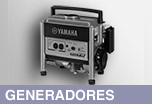
<style>
.page{position:relative;width:152px;height:104px}
.page>*{position:absolute;margin:0}
.t1{font:14px "Helvetica-Bold";color:#fffefe}
</style>
<div class="page">
<p class="t1" style="left:5px;top:89px;width:109px;height:12px">GENERADORES</p>
</div>
